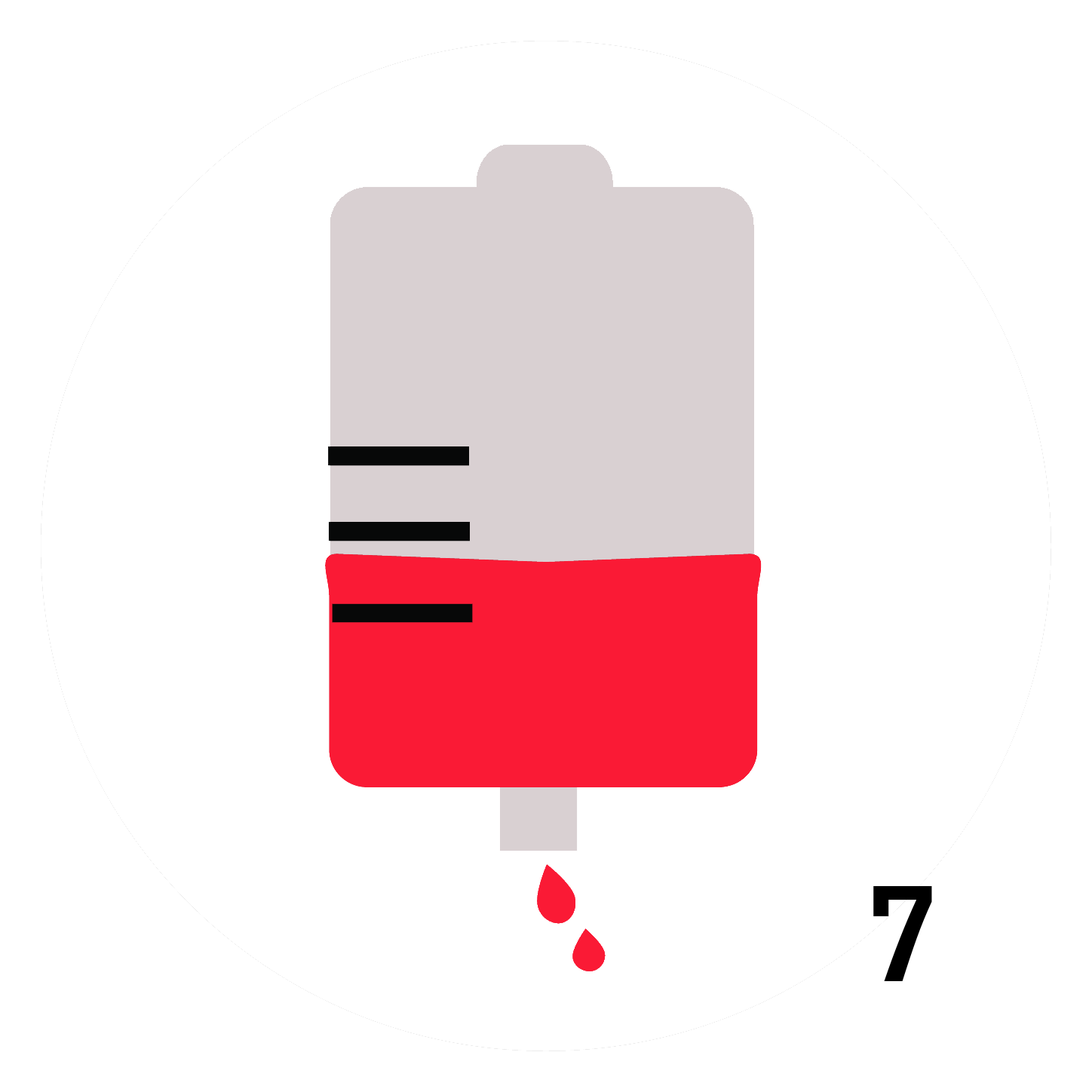
<style>
.page{position:relative;width:1092px;height:1092px;background:#ffffff}
.page>*{position:absolute;margin:0}
.t1{font:220px "DilleniaUPCBold";color:#000000}
</style>
<div class="page">
<p class="t1" style="left:873px;top:886px;width:59px;height:95px">7</p>
</div>
